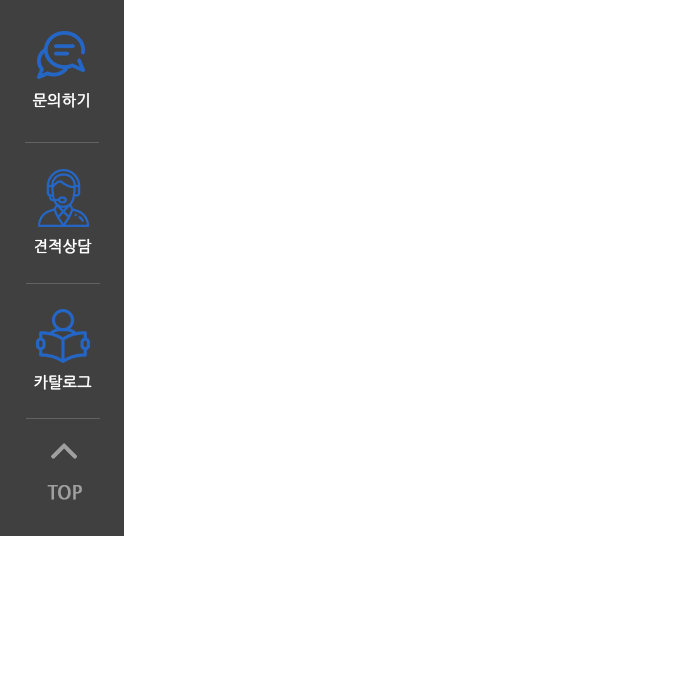
<style>
.page{position:relative;width:700px;height:700px;background:#ffffff}
.page>*{position:absolute;margin:0}
.t1{font:15.2px "NanumGothic";color:#ffffff;font-weight:bold}
.t2{font:18px "NanumGothicBold";color:#9f9f9f;font-weight:bold}
</style>
<div class="page">
<p class="t1" style="left:32px;top:92px;width:57px;height:16px">문의하기</p>
<p class="t1" style="left:35px;top:238px;width:57px;height:16px">견적상담</p>
<p class="t1" style="left:34px;top:374px;width:58px;height:16px">카탈로그</p>
<p class="t2" style="left:47px;top:485px;width:35px;height:15px">TOP</p>
</div>
